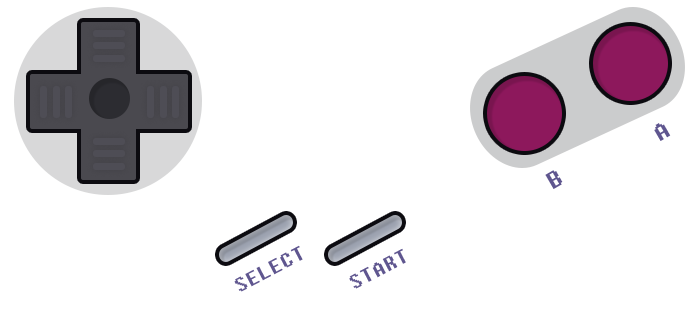
<style>
.page{position:relative;width:700px;height:312px;background:#ffffff}
.page>*{position:absolute;margin:0}
.t1{font:29.1px "DungGeunMo";letter-spacing:0.02em;color:#5f568f}
.t2{font:24.2px "DungGeunMo";letter-spacing:0.02em;color:#5f568f}
</style>
<div class="page">
<p class="t1" style="left:654px;top:123px;width:17px;height:18px;rotate:-30deg">A</p>
<p class="t1" style="left:545px;top:170px;width:18px;height:19px;rotate:-30deg">B</p>
<p class="t2" style="left:234px;top:245px;width:69px;height:47px;rotate:-28deg">SELECT</p>
<p class="t2" style="left:349px;top:248px;width:57px;height:41px;rotate:-28deg">START</p>
</div>
